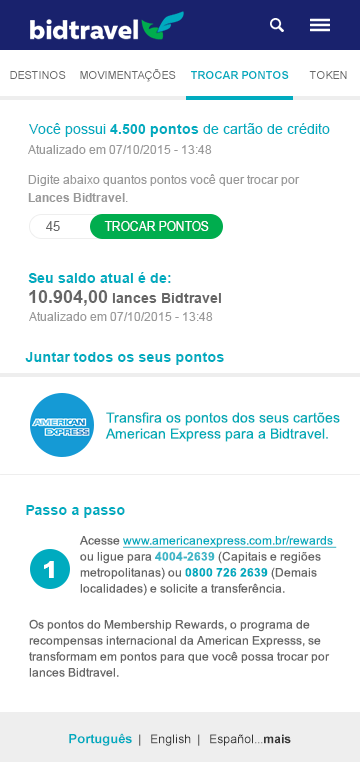
<style>
.page{position:relative;width:360px;height:762px;background:#ffffff}
.page>*{position:absolute;margin:0}
.t1{font:11px "ArialMT";color:#666666;text-transform:uppercase}
.t2{font:11px "Arial-BoldMT";color:#00abbf;text-transform:uppercase}
.t3{font:14px "ArialMT";color:#00abbf}
.t4{font:14px "Arial-BoldMT";color:#00abbf}
.t5{font:12px "ArialMT";color:#999999}
.t6{font:12px/18px "ArialMT";color:#999999}
.t7{font:12px/18px "Arial-BoldMT";color:#999999}
.t8{font:13px "ArialMT";color:#666666}
.t9{font:12.5px "ArialMT";color:#ffffff;text-transform:uppercase;scale:0.96 1}
.t10{font:14px "Arial-BoldMT";color:#666666}
.t11{font:18px "Arial-BoldMT";color:#666666}
.t12{font:14px/16px "ArialMT";color:#00abb7}
.t13{font:12px/16px "ArialMT";color:#666666}
.t14{font:12px/16px "ArialMT";color:#00abbf;text-decoration:underline}
.t15{font:12px/16px "Arial-BoldMT";color:#3db6c7}
.t16{font:12px/16px "Arial-BoldMT";color:#00abbf}
.t17{font:24px "Arial-Black";color:#ffffff}
.t18{font:12px "ArialMT";color:#333333}
.t19{font:13px "Arial-BoldMT";color:#00abbf}
.t20{font:12px "Arial-BoldMT";color:#333333}
</style>
<div class="page">
<p class="t1" style="left:10px;top:71px;width:56px;height:8px">Destinos</p>
<p class="t1" style="left:80px;top:69px;width:96px;height:13px">Movimentações</p>
<p class="t2" style="left:191px;top:71px;width:98px;height:8px">Trocar Pontos</p>
<p class="t1" style="left:309px;top:71px;width:38px;height:8px">Token</p>
<p class="t3" style="left:29px;top:123px;width:301px;height:14px">Você possui <span class="t4">4.500 pontos</span> de cartão de crédito</p>
<p class="t5" style="left:28px;top:145px;width:184px;height:9px">Atualizado em 07/10/2015 - 13:48</p>
<p class="t6" style="left:28px;top:174px;width:272px;height:28px">Digite abaixo quantos pontos você quer trocar por <br><span class="t7">Lances Bidtravel</span>.</p>
<p class="t8" style="left:46px;top:221px;width:14px;height:10px">45</p>
<p class="t9" style="left:104px;top:221px;width:105px;height:10px">trocar pontos</p>
<p class="t4" style="left:28px;top:272px;width:143px;height:11px">Seu saldo atual é de:</p>
<p class="t10" style="left:29px;top:290px;width:192px;height:16px"><span class="t11">10.904,00</span> lances Bidtravel</p>
<p class="t5" style="left:29px;top:312px;width:184px;height:9px">Atualizado em 07/10/2015 - 13:48</p>
<p class="t4" style="left:25px;top:352px;width:199px;height:13px">Juntar todos os seus pontos</p>
<p class="t12" style="left:105px;top:412px;width:235px;height:30px">Transfira os pontos dos seus cartões <br>American Express para a Bidtravel.</p>
<p class="t4" style="left:26px;top:505px;width:99px;height:13px">Passo a passo</p>
<p class="t13" style="left:79px;top:535px;width:258px;height:61px">Acesse <span class="t14">www.americanexpress.com.br/rewards <br></span>ou ligue para <span class="t15">4004-2639</span> (Capitais e regiões metropolitanas) ou <span class="t16">0800 726 2639</span> (Demais localidades) e solicite a transferência.</p>
<p class="t17" style="left:44px;top:561px;width:10px;height:17px">1</p>
<p class="t13" style="left:29px;top:619px;width:301px;height:58px">Os pontos do Membership Rewards, o programa de recompensas internacional da American Expresss, se transformam em pontos para que você possa trocar por lances Bidtravel.</p>
<p class="t18" style="left:69px;top:733px;width:222px;height:13px"><span class="t19">Português</span>  |   English  |   Español...<span class="t20">mais</span></p>
</div>
